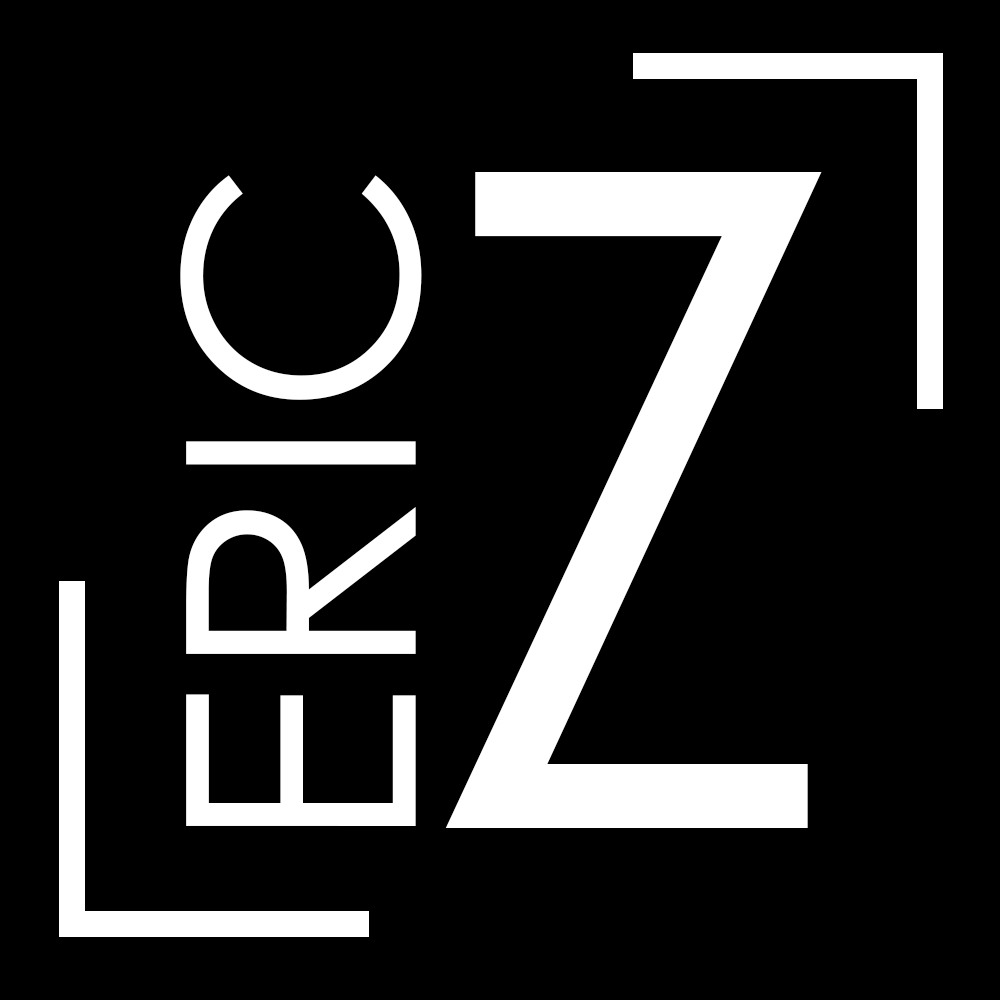
<style>
.page{position:relative;width:1000px;height:1000px;background:#000000}
.page>*{position:absolute;margin:0}
.t1{font:912.7px "CenturyGothic";color:#ffffff}
.t2{font:319.2px "CenturyGothic";color:#ffffff}
</style>
<div class="page">
<p class="t1" style="left:445px;top:172px;width:377px;height:656px">Z</p>
<p class="t2" style="left:180px;top:175px;width:242px;height:651px;rotate:-90deg">ERIC</p>
</div>
